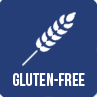
<style>
.page{position:relative;width:97px;height:97px;background:#253e77}
.page>*{position:absolute;margin:0}
.t1{font:18px "BebasNeue";color:#ffffff}
</style>
<div class="page">
<p class="t1" style="left:13px;top:73px;width:72px;height:13px">gluten-free</p>
</div>
